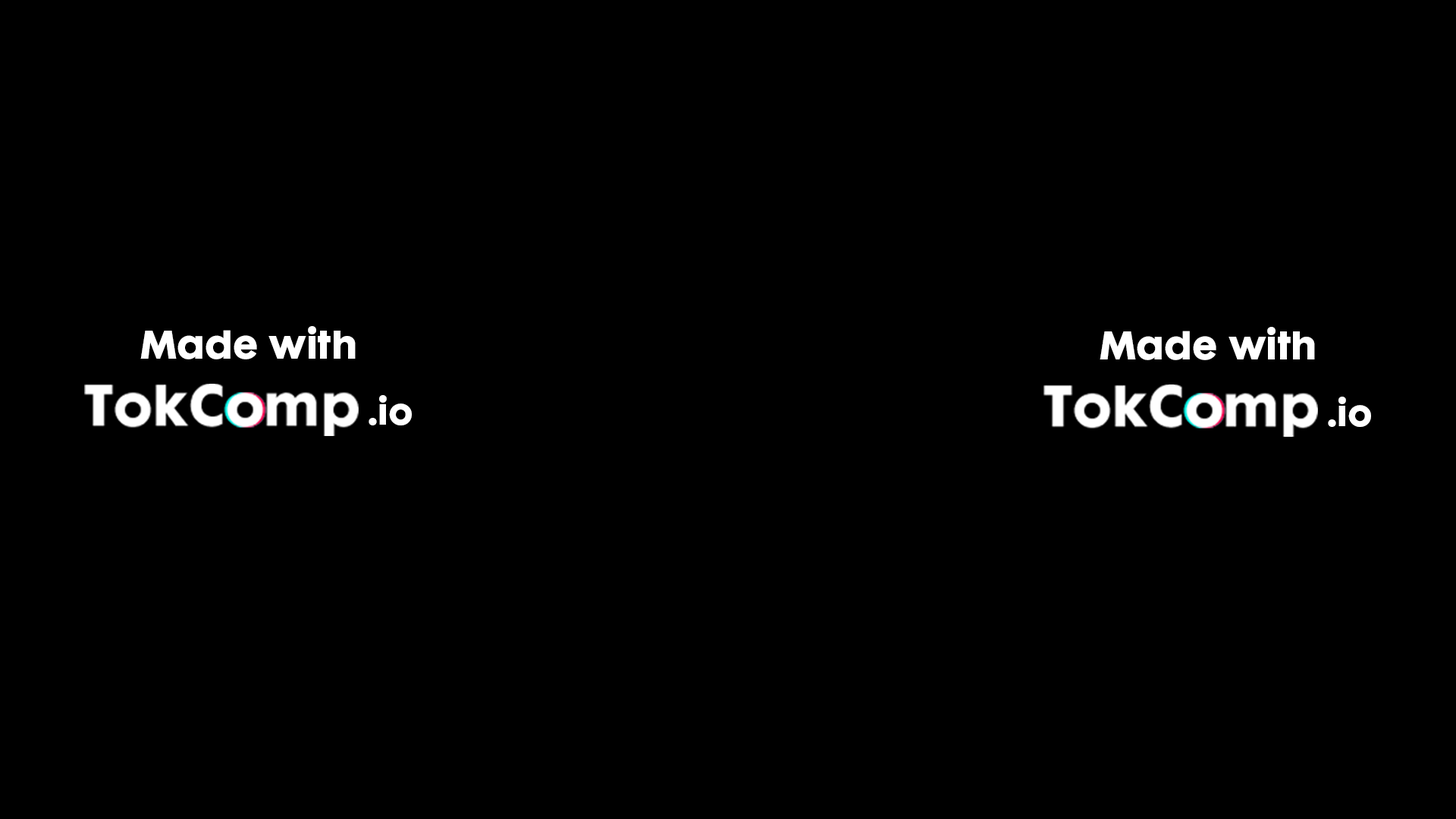
<style>
.page{position:relative;width:1456px;height:819px;background:#000000}
.page>*{position:absolute;margin:0}
.t1{font:36.8px "FuturaMaxiCGBold";color:#ffffff}
.t2{font:33.5px "FuturaMaxiCGBold";color:#ffffff}
</style>
<div class="page">
<p class="t1" style="left:140px;top:326px;width:216px;height:33px">Made with</p>
<p class="t1" style="left:1100px;top:327px;width:215px;height:33px">Made with</p>
<p class="t2" style="left:369px;top:395px;width:43px;height:30px">.io</p>
<p class="t2" style="left:1328px;top:397px;width:43px;height:30px">.io</p>
</div>
